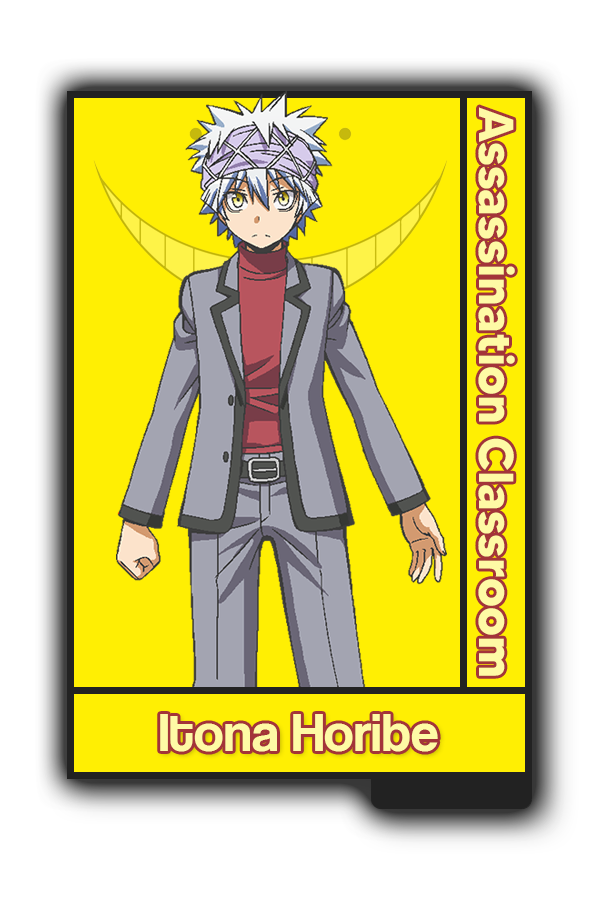
<style>
.page{position:relative;width:600px;height:900px;background:#ffef03}
.page>*{position:absolute;margin:0}
.t1{font:48.8px "MADETOMMY-Bold";color:#fefaa5}
.t2{font:55px "CoolveticaRg-Regular";color:#fefaa5}
</style>
<div class="page">
<p class="t1" style="left:478px;top:107px;width:37px;height:569px;rotate:90deg">Assassination Classroom</p>
<p class="t2" style="left:160px;top:714px;width:278px;height:38px">Itona Horibe</p>
</div>
